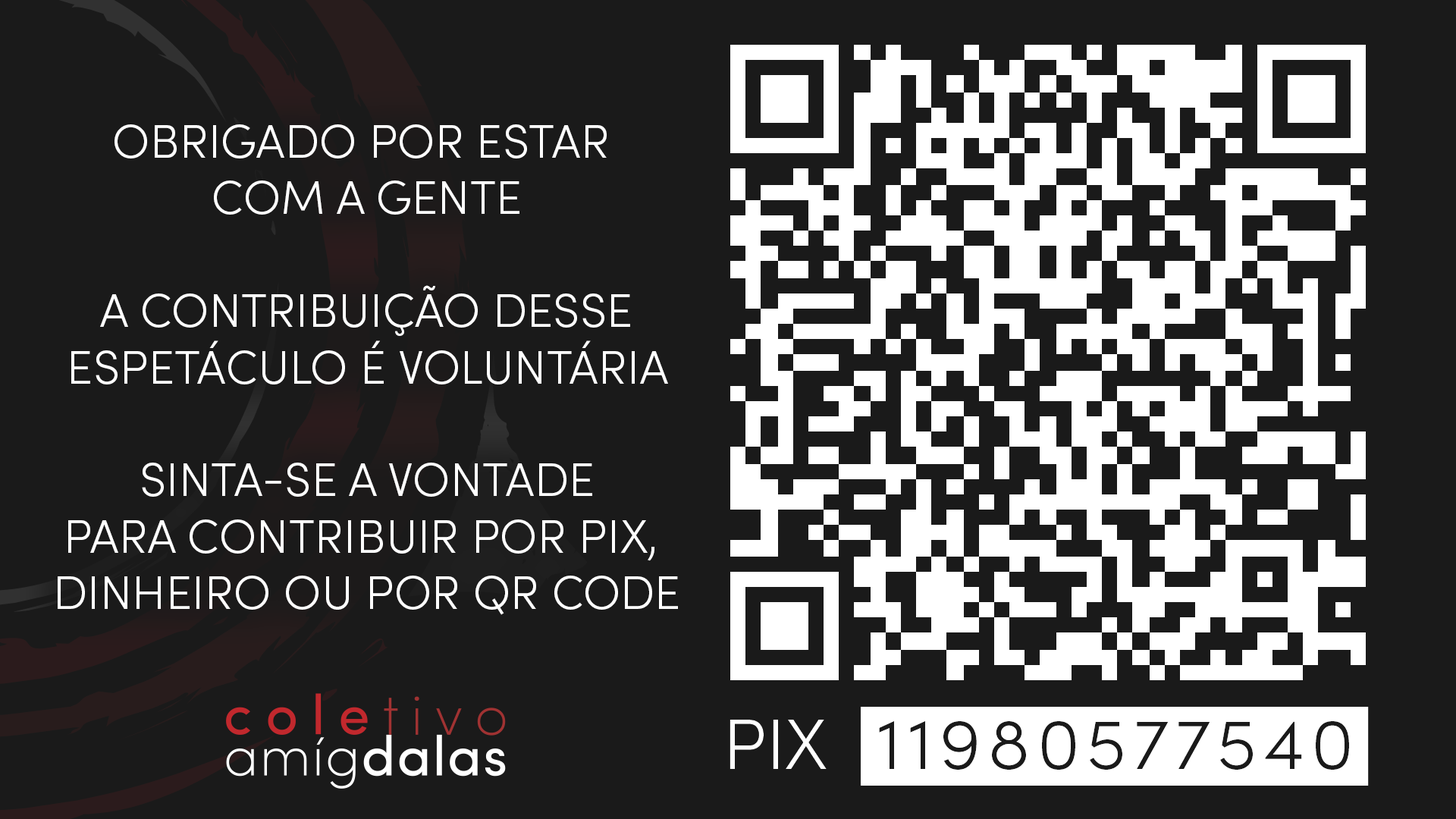
<style>
.page{position:relative;width:1456px;height:819px;background:#1a1a1a}
.page>*{position:absolute;margin:0}
.t1{font:47px "SofiaProLight";color:#ffffff;text-transform:uppercase}
.t2{font:71.6px "SofiaProLight";color:#ffffff;text-transform:uppercase}
.t3{font:71.6px "SofiaProLight";letter-spacing:0.1em;color:#1a1a1a;text-transform:uppercase}
.t4{font:71.6px "SofiaProLight";color:#1a1a1a;text-transform:uppercase}
</style>
<div class="page">
<p class="t1" style="left:58px;top:124px;width:620px;height:491px;text-align:center">ObRigado por estar <br>com a gente<br><br> a contribuição desse <br>espetáculo é voluntária<br><br>Sinta-se a vontade<br>para contribuir por pix, <br>dinheiro ou por qr code</p>
<p class="t1" style="left:58px;top:124px;width:620px;height:491px;text-align:center">ObRigado por estar <br>com a gente<br><br> a contribuição desse <br>espetáculo é voluntária<br><br>Sinta-se a vontade<br>para contribuir por pix, <br>dinheiro ou por qr code</p>
<p class="t2" style="left:730px;top:720px;width:97px;height:49px">Pix</p>
<p class="t3" style="left:879px;top:721px;width:470px;height:49px"><span class="t4"> </span>11980577540</p>
</div>
